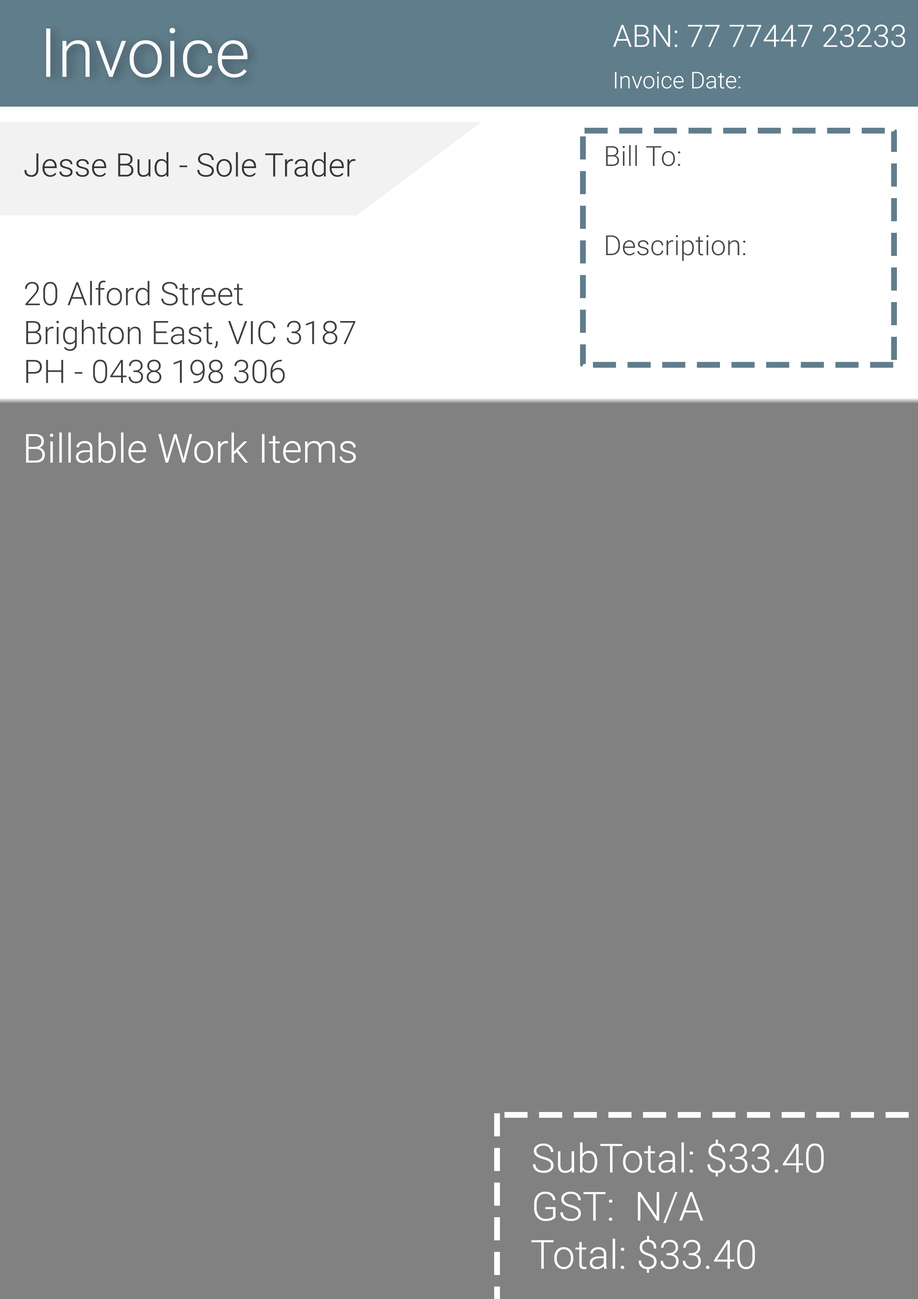
<style>
.page{position:relative;width:918px;height:1299px;background:#818181}
.page>*{position:absolute;margin:0}
.t1{font:67.9px "Roboto-Light";color:#fbfbfb}
.t2{font:30.9px "Roboto-Light";color:#fbfbfb}
.t3{font:23.1px "Roboto-Light";color:#ffffff}
.t4{font:27.8px "Roboto-Light";color:#484848}
.t5{font:32.4px "Roboto-Light";color:#363738}
.t6{font:32.4px "Roboto-Light";color:#414141}
.t7{font:40.1px "Roboto-Light";color:#fefefe}
</style>
<div class="page">
<p class="t1" style="left:46px;top:28px;width:202px;height:50px">Invoice</p>
<p class="t2" style="left:613px;top:24px;width:293px;height:23px">ABN: 77 77447 23233</p>
<p class="t3" style="left:615px;top:71px;width:126px;height:18px">Invoice Date:</p>
<p class="t4" style="left:606px;top:145px;width:74px;height:21px">Bill To:</p>
<p class="t5" style="left:24px;top:152px;width:332px;height:25px">Jesse Bud - Sole Trader</p>
<p class="t4" style="left:606px;top:235px;width:140px;height:26px">Description:</p>
<p class="t6" style="left:25px;top:280px;width:330px;height:103px">20 Alford Street <br>Brighton East, VIC 3187<br>PH - 0438 198 306</p>
<p class="t7" style="left:26px;top:432px;width:330px;height:31px">Billable Work Items</p>
<p class="t7" style="left:531px;top:1139px;width:293px;height:134px">SubTotal: $33.40<br> GST:  N/A<br> Total: $33.40</p>
</div>
